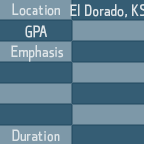
<style>
.page{position:relative;width:144px;height:144px;background:#355d74}
.page>*{position:absolute;margin:0}
.t1{font:12px "qontra-Regular";color:#dce4e8}
</style>
<div class="page">
<p class="t1" style="left:12px;top:3px;width:48px;height:13px">Location</p>
<p class="t1" style="left:70px;top:4px;width:76px;height:14px">El Dorado, KS</p>
<p class="t1" style="left:25px;top:25px;width:22px;height:13px">GPA</p>
<p class="t1" style="left:11px;top:45px;width:53px;height:17px">Emphasis</p>
<p class="t1" style="left:12px;top:129px;width:48px;height:13px">Duration</p>
</div>
